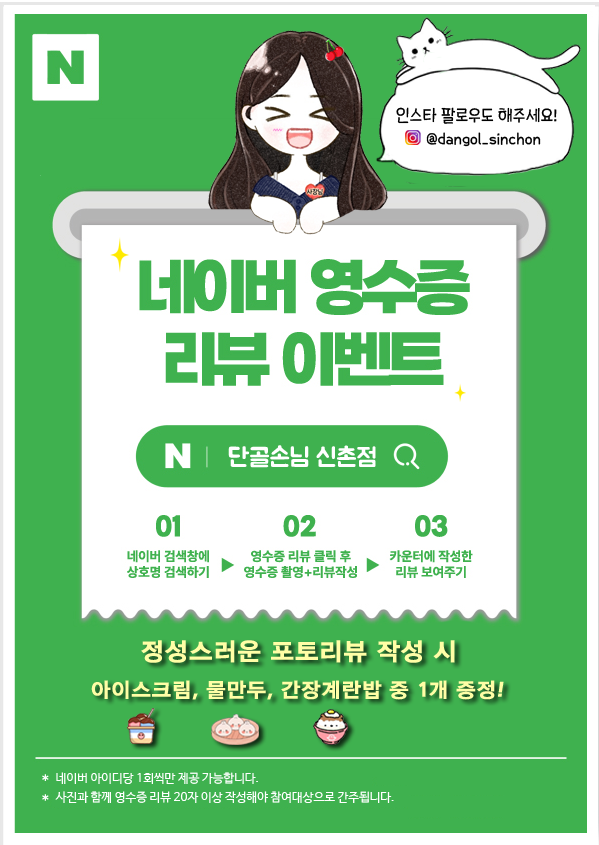
<style>
.page{position:relative;width:599px;height:845px;background:#3fb14f}
.page>*{position:absolute;margin:0}
.t1{font:18px "THEMiss";color:#000000}
.t2{font:16px "THEMiss";color:#000000}
.t3{font:26px "Pix_BMJUAOTF";color:#ffffff}
.t4{font:24px "Pix_HUJingo162";color:#fffea6}
.t5{font:20px "Pix_HUJingo162";color:#fffea6}
.t6{font:12px "NanumBarunGothic";color:#ffffff}
</style>
<div class="page">
<p class="t1" style="left:396px;top:107px;width:161px;height:17px">인스타 팔로우도 해주세요!</p>
<p class="t2" style="left:426px;top:132px;width:115px;height:15px">@dangol_sinchon</p>
<p class="t3" style="left:228px;top:445px;width:148px;height:23px">단골손님 신촌점</p>
<p class="t4" style="left:141px;top:640px;width:314px;height:23px">정성스러운 포토리뷰 작성 시</p>
<p class="t5" style="left:91px;top:680px;width:413px;height:20px">아이스크림, 물만두, 간장계란밥 중 1개 증정!</p>
<p class="t6" style="left:56px;top:772px;width:202px;height:12px">네이버 아이디당 1회씩만 제공 가능합니다.</p>
<p class="t6" style="left:55px;top:791px;width:339px;height:12px">사진과 함께 영수증 리뷰 20자 이상 작성해야 참여대상으로 간주됩니다.</p>
</div>
